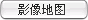
<style>
.page{position:relative;width:88px;height:20px}
.page>*{position:absolute;margin:0}
.t1{font:12px "SimSun";color:#2d2d2d}
</style>
<div class="page">
<p class="t1" style="left:18px;top:4px;width:47px;height:11px">影像地图</p>
</div>
